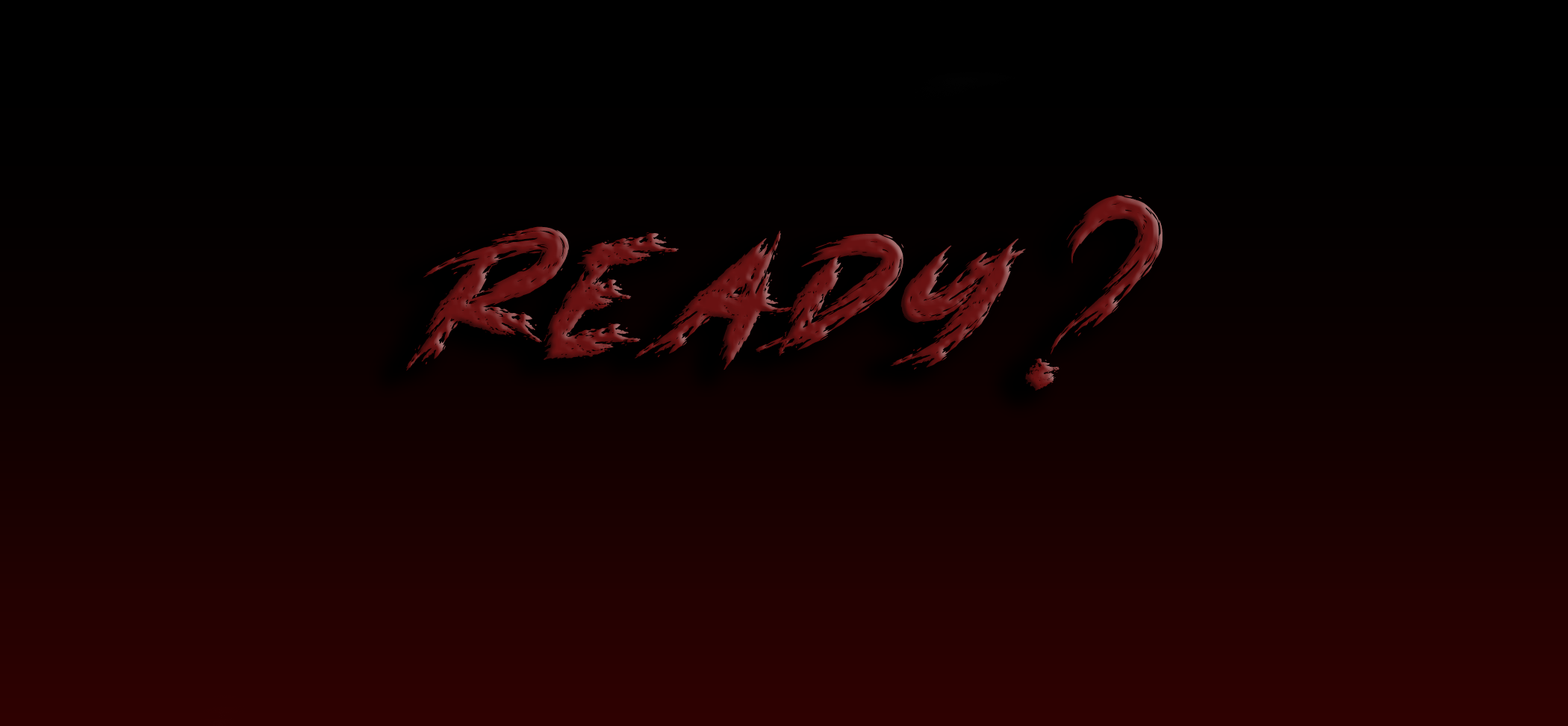
<style>
.page{position:relative;width:1568px;height:726px}
.page>*{position:absolute;margin:0}
.t1{font:186.7px "DANGERZONE";color:#691212}
</style>
<div class="page">
<p class="t1" style="left:406px;top:195px;width:757px;height:196px">Ready?</p>
</div>
